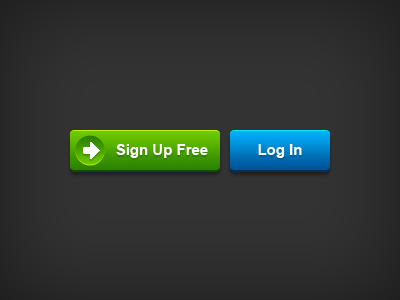
<style>
.page{position:relative;width:400px;height:300px}
.page>*{position:absolute;margin:0}
.t1{font:15px "Arial-BoldMT";color:#ffffff}
</style>
<div class="page">
<p class="t1" style="left:116px;top:144px;width:92px;height:14px">Sign Up Free</p>
<p class="t1" style="left:258px;top:144px;width:44px;height:14px">Log In</p>
</div>
